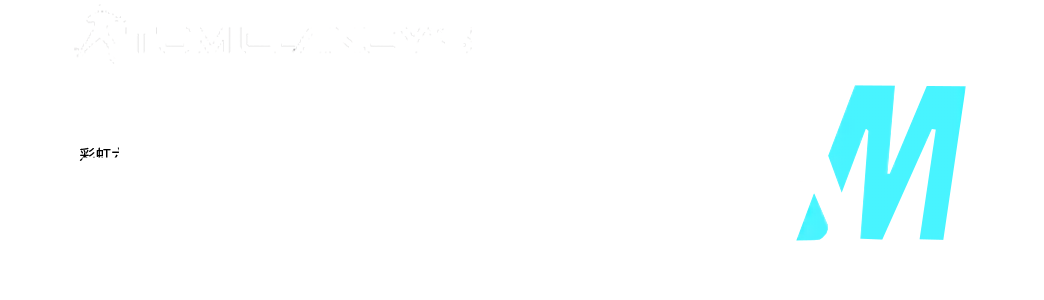
<style>
.page{position:relative;width:1044px;height:300px;background:#ffffff}
.page>*{position:absolute;margin:0}
.t1{font:16px "SourceHanSansCN-Normal"}
</style>
<div class="page">
<p class="t1" style="left:79px;top:147px;width:64px;height:16px">彩虹六号</p>
</div>
